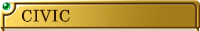
<style>
.page{position:relative;width:200px;height:31px}
.page>*{position:absolute;margin:0}
.t1{font:16px "CenturySchoolbook";letter-spacing:0.025em;color:#321a02}
</style>
<div class="page">
<p class="t1" style="left:21px;top:9px;width:49px;height:13px">CIVIC</p>
</div>
